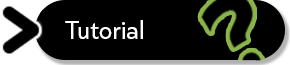
<style>
.page{position:relative;width:290px;height:65px;background:#000000}
.page>*{position:absolute;margin:0}
.t1{font:26px "QuietSans-Regular";color:#ffffff}
</style>
<div class="page">
<p class="t1" style="left:65px;top:20px;width:78px;height:19px">Tutorial</p>
</div>
